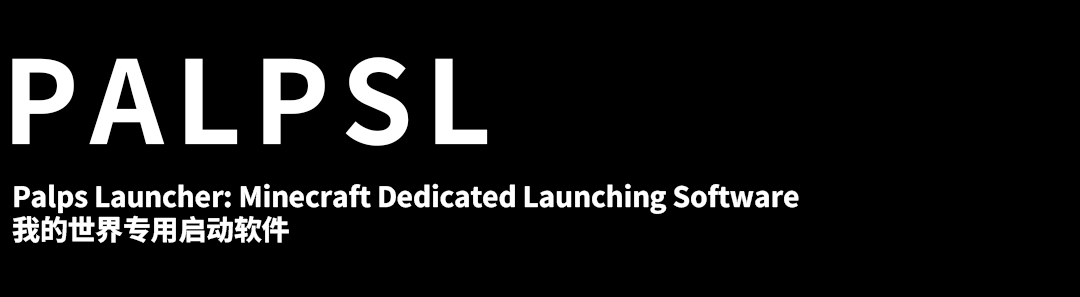
<style>
.page{position:relative;width:1080px;height:297px;background:#000000}
.page>*{position:absolute;margin:0}
.t1{font:114.9px "NotoSansSC-Bold";letter-spacing:0.1em;color:#ffffff}
.t2{font:28px "NotoSansSC-ExtraBold";letter-spacing:-0.01em;color:#ffffff}
</style>
<div class="page">
<p class="t1" style="left:12px;top:57px;width:476px;height:89px">PALPSL</p>
<p class="t2" style="left:12px;top:183px;width:787px;height:60px">Palps Launcher: Minecraft Dedicated Launching Software <br>我的世界专用启动软件</p>
</div>
